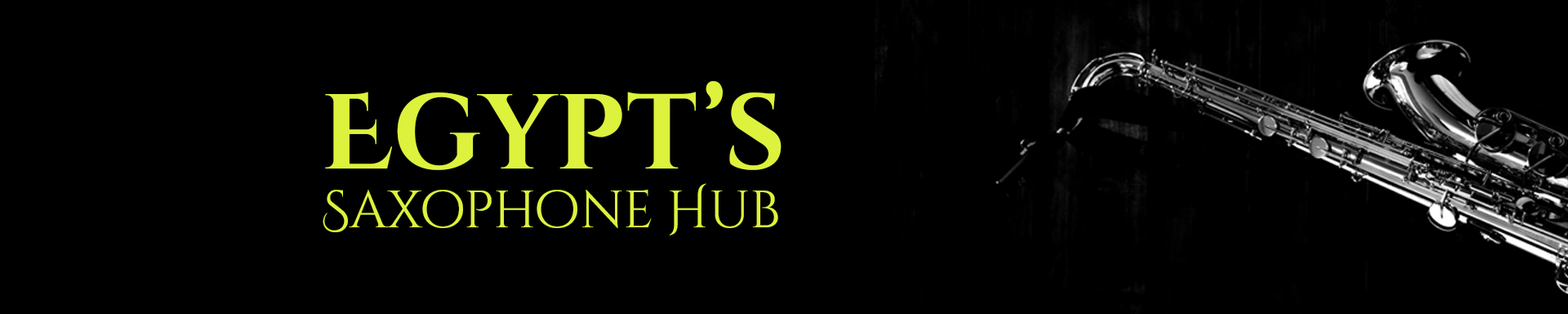
<style>
.page{position:relative;width:1568px;height:314px;background:#000000}
.page>*{position:absolute;margin:0}
.t1{font:106.6px "CinzelDecorative-Bold";color:#ddf23d}
.t2{font:52.4px "CinzelDecorative-Regular";color:#ddf23d}
</style>
<div class="page">
<p class="t1" style="left:325px;top:81px;width:457px;height:89px">Egypt’s</p>
<p class="t2" style="left:323px;top:183px;width:455px;height:52px">Saxophone Hub</p>
</div>
